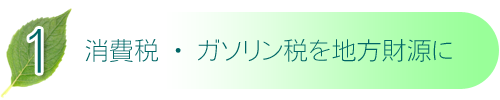
<style>
.page{position:relative;width:500px;height:100px;background:#ffffff}
.page>*{position:absolute;margin:0}
.t1{font:58.3px "FMotoyaCedar-W1-90mskp-RKSJ-H";color:#006666}
.t2{font:25px "NfMotoyaCedar-W1-90mskp-RKSJ-H";color:#006666}
</style>
<div class="page">
<p class="t1" style="left:29px;top:29px;width:12px;height:44px">1</p>
<p class="t2" style="left:85px;top:39px;width:367px;height:23px">消費税・ガソリン税を地方財源に</p>
</div>
